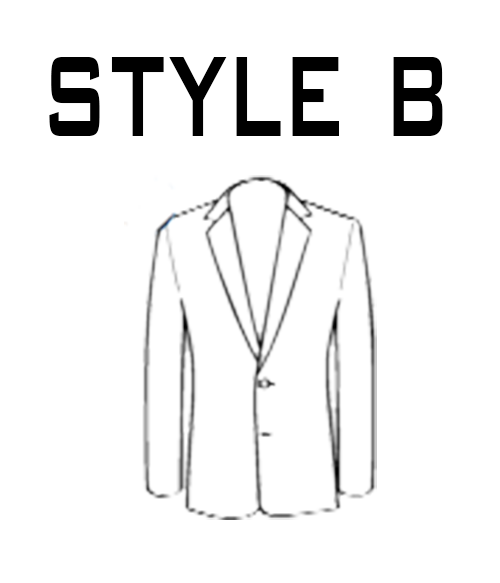
<style>
.page{position:relative;width:500px;height:583px;background:#ffffff}
.page>*{position:absolute;margin:0}
.t1{font:186.2px "BankGothicBT-Medium";color:#000000;scale:0.54 1}
</style>
<div class="page">
<p class="t1" style="left:49px;top:57px;width:394px;height:79px">style b</p>
</div>
